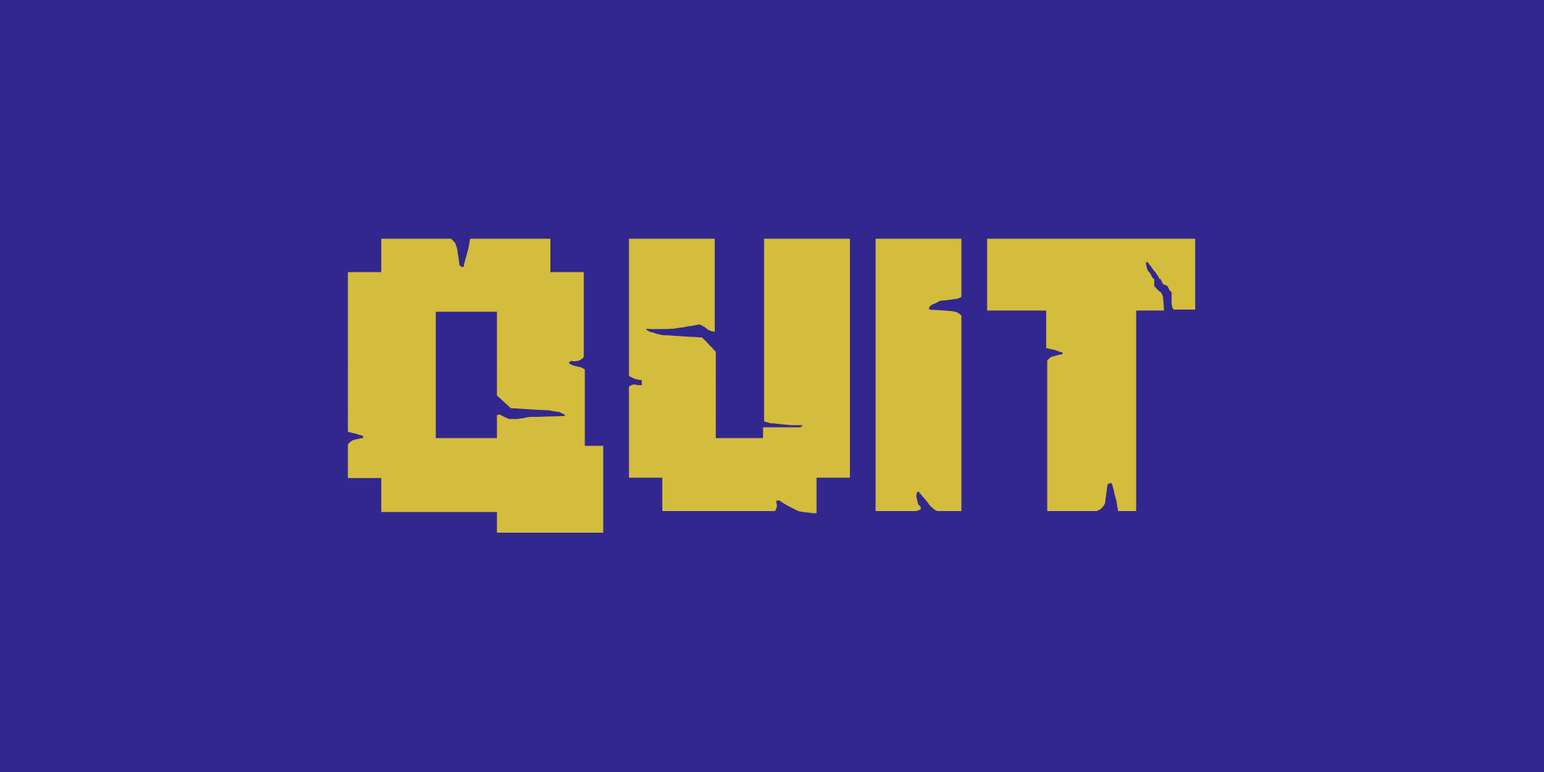
<style>
.page{position:relative;width:1544px;height:772px;background:#31278f}
.page>*{position:absolute;margin:0}
.t1{font:347.5px "MinecrafterAlt";color:#d4bd3c}
</style>
<div class="page">
<p class="t1" style="left:347px;top:239px;width:849px;height:294px">QUIT</p>
</div>
